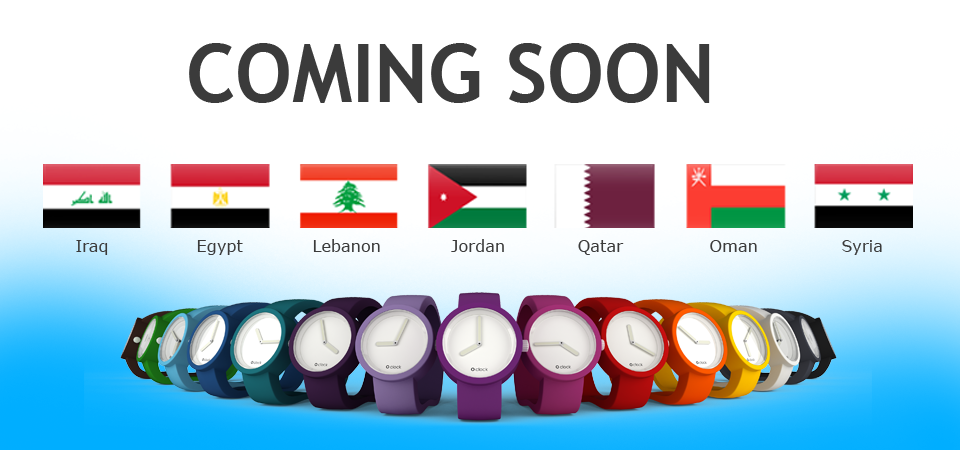
<style>
.page{position:relative;width:960px;height:450px;background:#ffffff}
.page>*{position:absolute;margin:0}
.t1{font:80.6px "TrebuchetMS-Bold";color:#3b3b3b}
.t2{font:16.2px "Verdana";color:#3b3b3b}
</style>
<div class="page">
<p class="t1" style="left:189px;top:43px;width:521px;height:60px">COMING SOON</p>
<p class="t2" style="left:76px;top:240px;width:32px;height:15px">Iraq</p>
<p class="t2" style="left:197px;top:240px;width:46px;height:15px">Egypt</p>
<p class="t2" style="left:313px;top:239px;width:67px;height:13px">Lebanon</p>
<p class="t2" style="left:451px;top:239px;width:53px;height:13px">Jordan</p>
<p class="t2" style="left:578px;top:240px;width:46px;height:15px">Qatar</p>
<p class="t2" style="left:710px;top:240px;width:47px;height:12px">Oman</p>
<p class="t2" style="left:842px;top:240px;width:40px;height:15px">Syria</p>
</div>
